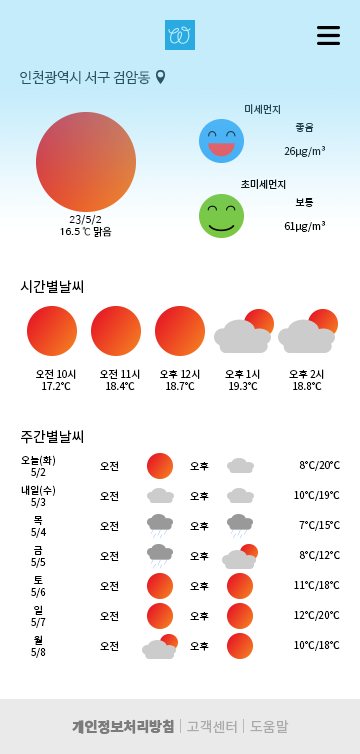
<style>
.page{position:relative;width:360px;height:754px;background:#ffffff}
.page>*{position:absolute;margin:0}
.t1{font:14px "NanumBarunGothic";color:#2c5362}
.t2{font:10px "NotoSansKR-Regular";color:#264755}
.t3{font:10px "NotoSansKR-Regular";color:#192f38}
.t4{font:10px "NotoSansKR-Regular";color:#0d181d}
.t5{font:10px "NotoSansKR-Regular";color:#000000}
.t6{font:10.2px "NanumBarunGothic";color:#000000}
.t7{font:14px "NotoSansKR-Regular";color:#000000}
.t8{font:14px "NotoSansKR-Black";color:#7d7b7b}
.t9{font:14px "NotoSansKR-Regular";color:#abaaaa}
</style>
<div class="page">
<p class="t1" style="left:20px;top:70px;width:131px;height:15px">인천광역시 서구 검암동</p>
<p class="t2" style="left:245px;top:104px;width:35px;height:10px">미세먼지</p>
<p class="t3" style="left:284px;top:123px;width:41px;height:34px;text-align:center">좋음<br><br>26μg/m³</p>
<p class="t4" style="left:241px;top:179px;width:45px;height:10px">초미세먼지</p>
<p class="t5" style="left:284px;top:198px;width:41px;height:34px;text-align:center">보통<br><br>61μg/m³</p>
<p class="t6" style="left:60px;top:214px;width:52px;height:23px;text-align:center">23/5/2 <br>16.5 ℃ 맑음</p>
<p class="t7" style="left:20px;top:280px;width:63px;height:13px">시간별날씨</p>
<p class="t5" style="left:36px;top:369px;width:40px;height:21px;text-align:center">오전 10시<br>17.2℃</p>
<p class="t5" style="left:100px;top:369px;width:40px;height:21px;text-align:center">오전 11시<br>18.4℃</p>
<p class="t5" style="left:160px;top:369px;width:40px;height:21px;text-align:center">오후 12시<br>18.7℃</p>
<p class="t5" style="left:225px;top:369px;width:35px;height:21px;text-align:center">오후 1시<br>19.3℃</p>
<p class="t5" style="left:289px;top:369px;width:35px;height:21px;text-align:center">오후 2시<br>18.8℃</p>
<p class="t7" style="left:21px;top:430px;width:62px;height:14px">주간별날씨</p>
<p class="t5" style="left:21px;top:455px;width:34px;height:23px;text-align:center">오늘(화)<br>5/2</p>
<p class="t5" style="left:100px;top:461px;width:19px;height:10px">오전</p>
<p class="t5" style="left:190px;top:462px;width:19px;height:9px">오후</p>
<p class="t5" style="left:299px;top:461px;width:41px;height:10px">8℃/20℃</p>
<p class="t5" style="left:21px;top:485px;width:34px;height:23px;text-align:center">내일(수)<br>5/3</p>
<p class="t5" style="left:100px;top:491px;width:19px;height:10px">오전</p>
<p class="t5" style="left:190px;top:492px;width:19px;height:9px">오후</p>
<p class="t5" style="left:294px;top:491px;width:46px;height:10px">10℃/19℃</p>
<p class="t5" style="left:31px;top:516px;width:15px;height:22px;text-align:center">목<br>5/4</p>
<p class="t5" style="left:100px;top:521px;width:19px;height:10px">오전</p>
<p class="t5" style="left:299px;top:521px;width:41px;height:10px">7℃/15℃</p>
<p class="t5" style="left:190px;top:522px;width:19px;height:9px">오후</p>
<p class="t5" style="left:31px;top:546px;width:15px;height:22px;text-align:center">금<br>5/5</p>
<p class="t5" style="left:100px;top:551px;width:19px;height:10px">오전</p>
<p class="t5" style="left:190px;top:552px;width:19px;height:9px">오후</p>
<p class="t5" style="left:299px;top:551px;width:41px;height:10px">8℃/12℃</p>
<p class="t5" style="left:31px;top:576px;width:15px;height:22px;text-align:center">토<br>5/6</p>
<p class="t5" style="left:100px;top:581px;width:19px;height:10px">오전</p>
<p class="t5" style="left:190px;top:582px;width:19px;height:9px">오후</p>
<p class="t5" style="left:294px;top:581px;width:46px;height:10px">11℃/18℃</p>
<p class="t5" style="left:31px;top:605px;width:15px;height:23px;text-align:center">일<br>5/7</p>
<p class="t5" style="left:100px;top:611px;width:19px;height:10px">오전</p>
<p class="t5" style="left:190px;top:612px;width:19px;height:9px">오후</p>
<p class="t5" style="left:294px;top:611px;width:46px;height:10px">12℃/20℃</p>
<p class="t5" style="left:31px;top:635px;width:15px;height:23px;text-align:center">월<br>5/8</p>
<p class="t5" style="left:100px;top:641px;width:19px;height:10px">오전</p>
<p class="t5" style="left:294px;top:641px;width:46px;height:10px">10℃/18℃</p>
<p class="t5" style="left:190px;top:642px;width:19px;height:9px">오후</p>
<p class="t8" style="left:72px;top:719px;width:102px;height:15px">개인정보처리방침</p>
<p class="t9" style="left:187px;top:720px;width:50px;height:14px">고객센터</p>
<p class="t9" style="left:250px;top:720px;width:39px;height:13px">도움말</p>
</div>
